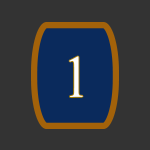
<style>
.page{position:relative;width:150px;height:150px;background:#333333}
.page>*{position:absolute;margin:0}
.t1{font:62.5px "TimesNewRomanPSMT";letter-spacing:0.1em;color:#ffffff;scale:0.75 1}
</style>
<div class="page">
<p class="t1" style="left:69px;top:56px;width:14px;height:41px">1</p>
</div>
